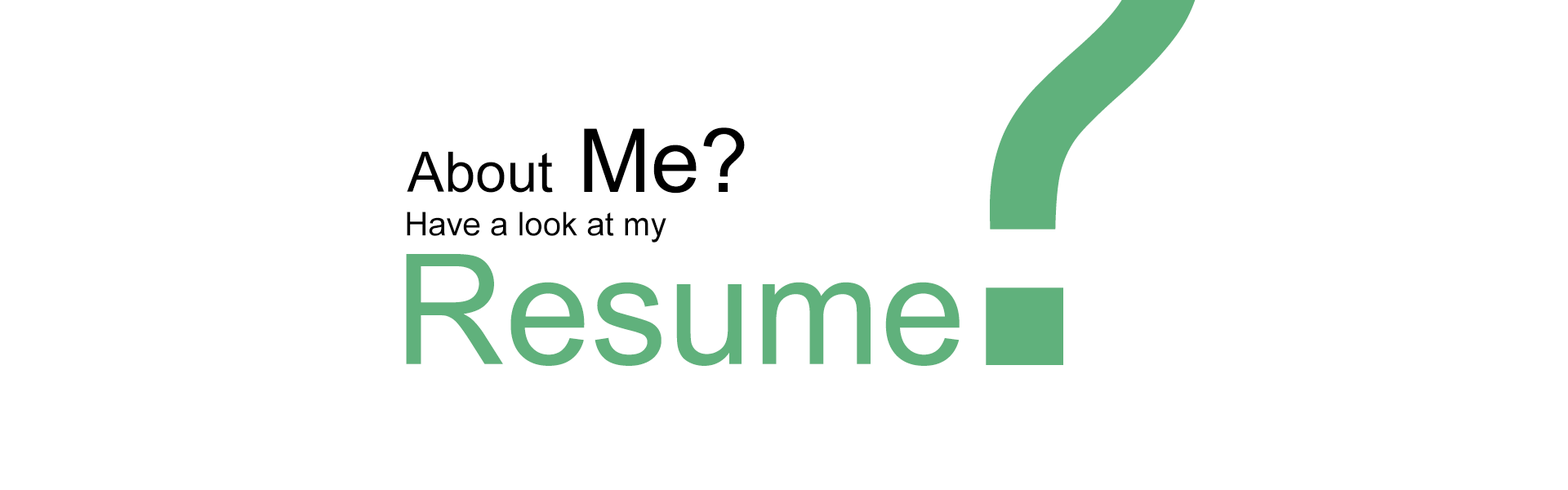
<style>
.page{position:relative;width:1568px;height:490px;background:#ffffff}
.page>*{position:absolute;margin:0}
.t1{font:55.8px "ArialMT";color:#000000}
.t2{font:88px "ArialMT";color:#000000}
.t3{font:32.7px "ArialMT";color:#000000}
.t4{font:153.4px "ArialMT";color:#60b17c}
</style>
<div class="page">
<p class="t1" style="left:407px;top:127px;width:338px;height:67px">About<span class="t2"> Me?</span></p>
<p class="t3" style="left:407px;top:212px;width:259px;height:31px">Have a look at my</p>
<p class="t4" style="left:406px;top:254px;width:554px;height:112px">Resume</p>
</div>
